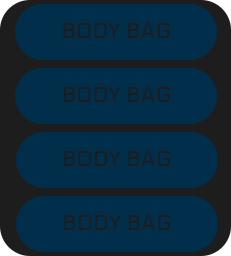
<style>
.page{position:relative;width:231px;height:256px;background:#002e4b}
.page>*{position:absolute;margin:0}
.t1{font:22px "Electrolize-Regular";color:#1d1d1d}
</style>
<div class="page">
<p class="t1" style="left:63px;top:87px;width:107px;height:15px">BODY BAG</p>
<p class="t1" style="left:64px;top:151px;width:106px;height:15px">BODY BAG</p>
<p class="t1" style="left:64px;top:215px;width:106px;height:15px">BODY BAG</p>
</div>
